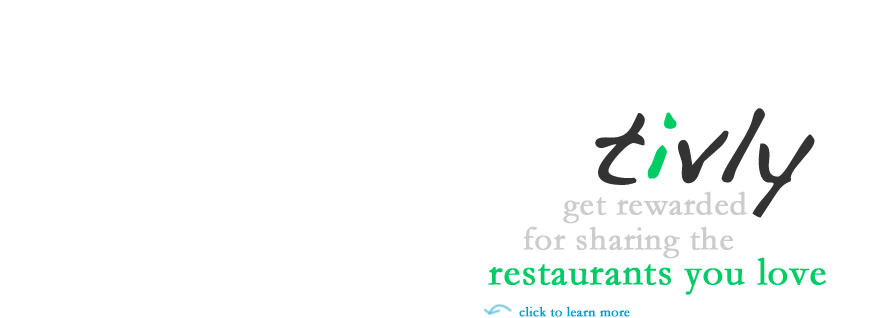
<style>
.page{position:relative;width:874px;height:318px;background:#ffffff}
.page>*{position:absolute;margin:0}
.t1{font:102px "Handwriting-Dakota";letter-spacing:0.01em;color:#333333;font-weight:bold}
.t2{font:102px "Handwriting-Dakota";letter-spacing:0.01em;color:#00cc66;font-weight:bold}
.t3{font:34px "Garamond";letter-spacing:0.01em;color:#cccccc;font-weight:bold}
.t4{font:40px "Garamond";letter-spacing:0.01em;color:#00cc66;font-weight:bold}
.t5{font:14px "Garamond";letter-spacing:0.01em;color:#0099cc;font-weight:bold}
</style>
<div class="page">
<p class="t1" style="left:595px;top:108px;width:220px;height:110px">t<span class="t2">i</span>vly</p>
<p class="t3" style="left:563px;top:191px;width:184px;height:33px">get rewarded</p>
<p class="t3" style="left:523px;top:226px;width:211px;height:33px">for sharing the</p>
<p class="t4" style="left:488px;top:257px;width:338px;height:38px">restaurants you love</p>
<p class="t5" style="left:519px;top:306px;width:111px;height:11px">click to learn more</p>
</div>
